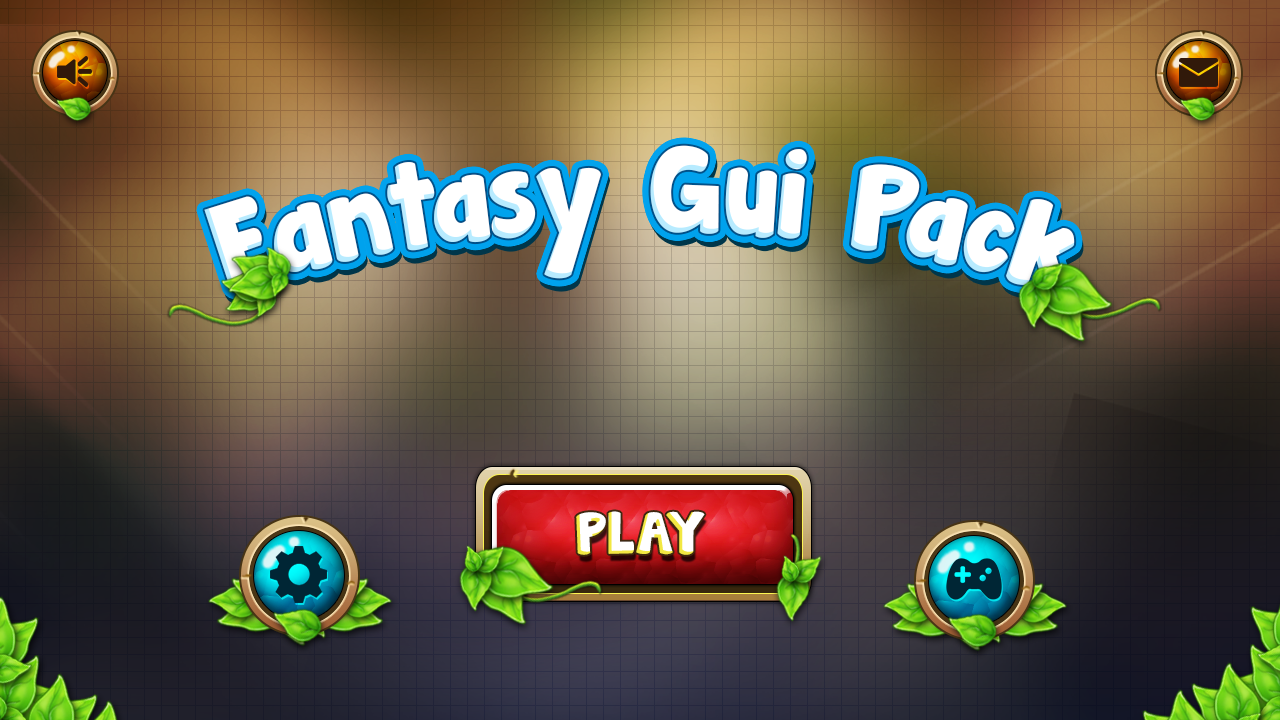
<style>
.page{position:relative;width:1280px;height:720px}
.page>*{position:absolute;margin:0}
.t1{font:109.6px "JandaManateeSolid";color:#ffffff}
.t2{font:52.4px "JandaManateeSolid";color:#ffffff;text-transform:uppercase}
</style>
<div class="page">
<p class="t1" style="left:204px;top:145px;width:871px;height:150px">Fantasy Gui Pack</p>
<p class="t2" style="left:576px;top:511px;width:129px;height:44px">Play</p>
</div>
